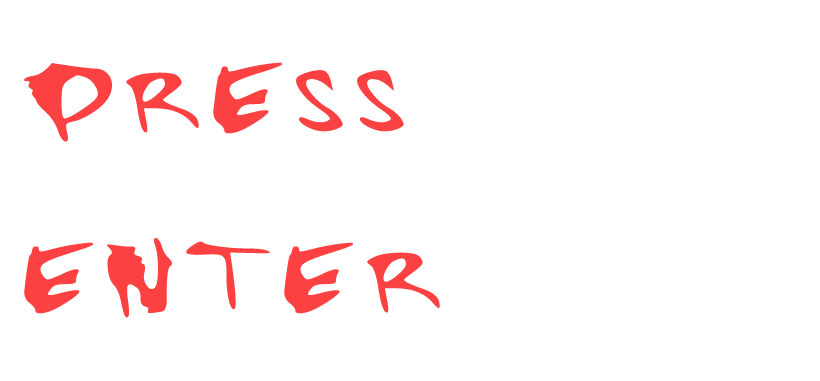
<style>
.page{position:relative;width:820px;height:381px;background:#ffffff}
.page>*{position:absolute;margin:0}
.t1{font:150px "Bustamantefont";color:#fb4141;scale:1.62 1}
</style>
<div class="page">
<p class="t1" style="left:24px;top:62px;width:416px;height:256px">PRESS<br>ENTER</p>
</div>
